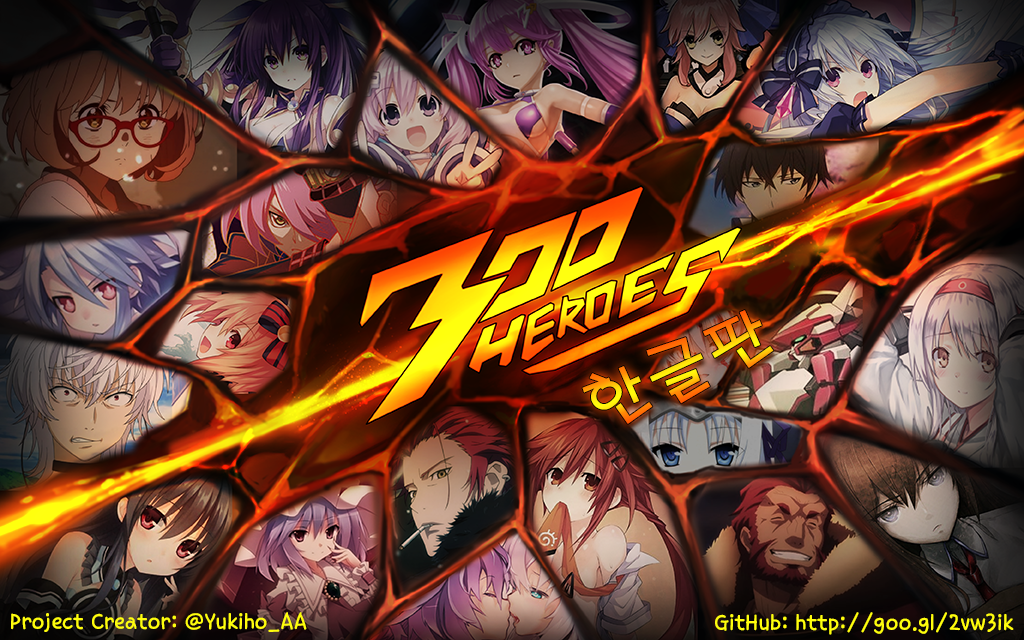
<style>
.page{position:relative;width:1024px;height:640px}
.page>*{position:absolute;margin:0}
.t1{font:66.7px "H2porM"}
.t2{font:25px "TTSonyeoilgiR";color:#fffd0d}
</style>
<div class="page">
<p class="t1" style="left:582px;top:310px;width:192px;height:114px;rotate:-25deg">한글판</p>
<p class="t2" style="left:11px;top:612px;width:296px;height:20px">Project Creator: @Yukiho_AA</p>
<p class="t2" style="left:715px;top:612px;width:299px;height:23px">GitHub: http://goo.gl/2vw3ik</p>
</div>
